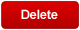
<style>
.page{position:relative;width:80px;height:30px}
.page>*{position:absolute;margin:0}
.t1{font:13px "Arial-BoldMT";letter-spacing:-0.025em;color:#ffffff}
</style>
<div class="page">
<p class="t1" style="left:21px;top:9px;width:37px;height:10px">Delete</p>
</div>
